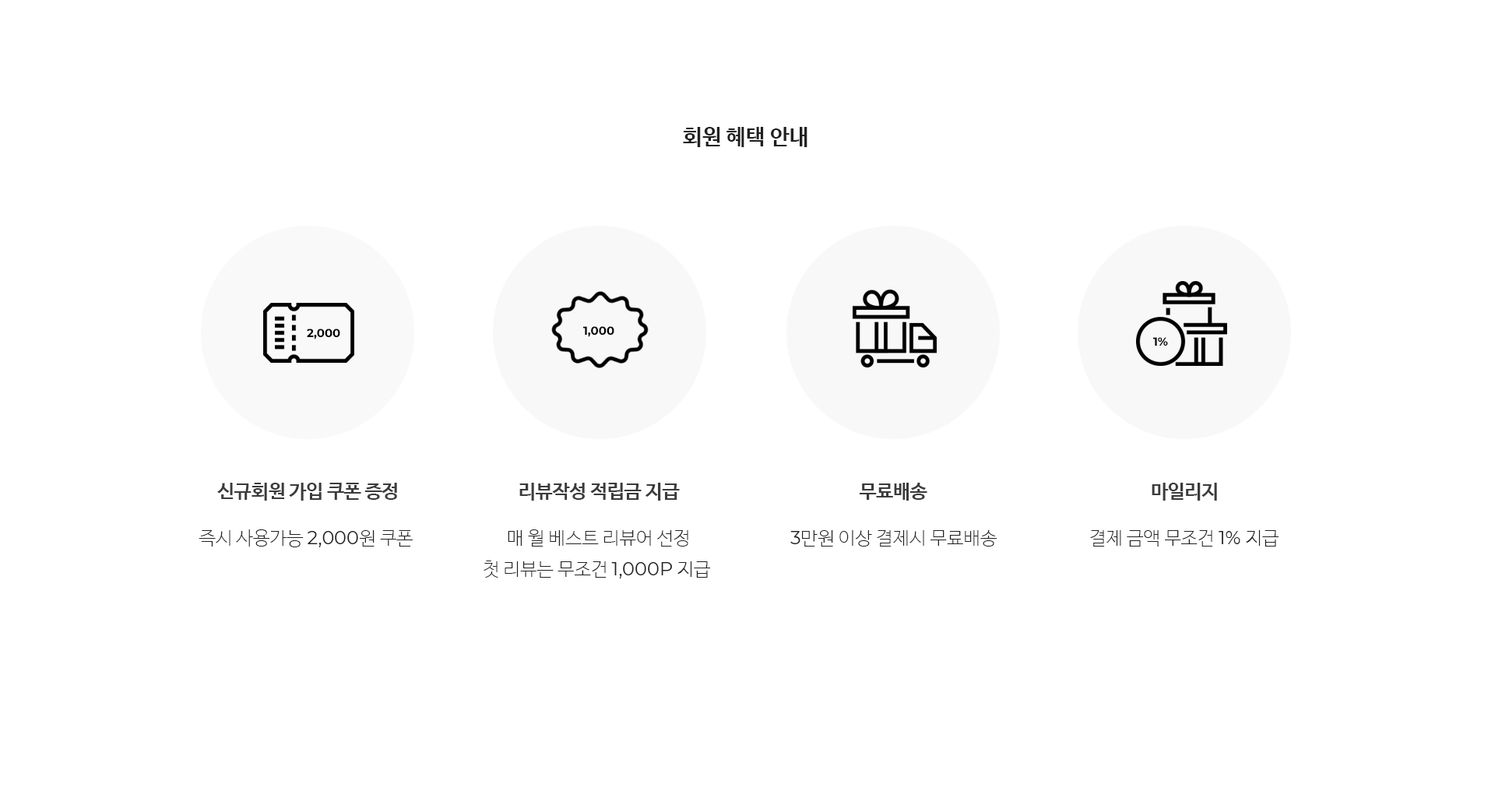
<style>
.page{position:relative;width:1495px;height:798px;background:#ffffff}
.page>*{position:absolute;margin:0}
.t1{font:21.8px "NanumBarunGothicBold";color:#202020}
.t2{font:11.7px "Montserrat-Bold";color:#000000}
.t3{font:19.5px "NanumBarunGothicBold";letter-spacing:-0.02em;color:#3b3b3b}
.t4{font:18.7px "NanumBarunGothicUltraLight";color:#202020}
.t5{font:18.7px "Montserrat-Regular";color:#202020}
.t6{font:18.7px/31.1px "NanumBarunGothicUltraLight";color:#202020}
.t7{font:18.7px/31.1px "Montserrat-Regular";color:#202020}
</style>
<div class="page">
<p class="t1" style="left:683px;top:127px;width:124px;height:20px">회원 혜택 안내</p>
<p class="t2" style="left:307px;top:328px;width:33px;height:11px">2,000</p>
<p class="t2" style="left:583px;top:326px;width:31px;height:11px">1,000</p>
<p class="t2" style="left:1153px;top:337px;width:15px;height:9px">1%</p>
<p class="t3" style="left:217px;top:483px;width:180px;height:18px">신규회원 가입 쿠폰 증정</p>
<p class="t3" style="left:519px;top:483px;width:161px;height:18px">리뷰작성 적립금 지급</p>
<p class="t3" style="left:859px;top:483px;width:68px;height:18px">무료배송</p>
<p class="t3" style="left:1151px;top:483px;width:66px;height:18px">마일리지</p>
<p class="t4" style="left:198px;top:529px;width:215px;height:18px">즉시 사용가능 <span class="t5">2,000</span>원 쿠폰</p>
<p class="t6" style="left:483px;top:529px;width:228px;height:49px;text-align:center">매 월 베스트 리뷰어 선정<br>첫 리뷰는 무조건 <span class="t7">1,000P</span> 지급</p>
<p class="t4" style="left:790px;top:530px;width:207px;height:16px"><span class="t5">3</span>만원 이상 결제시 무료배송</p>
<p class="t4" style="left:1090px;top:530px;width:189px;height:16px">결제 금액 무조건 <span class="t5">1% </span>지급</p>
</div>
